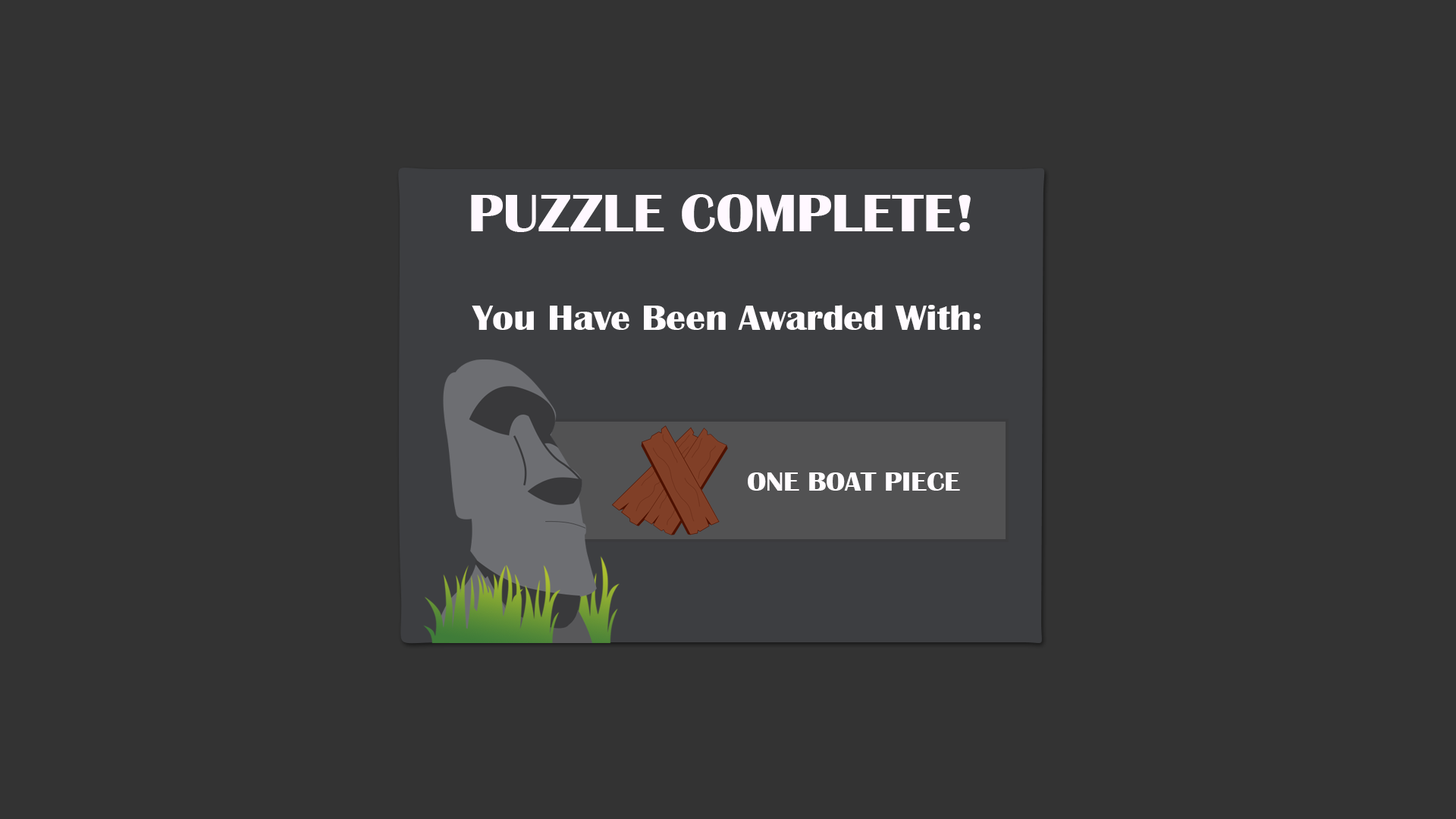
<style>
.page{position:relative;width:1456px;height:819px;background:#333333}
.page>*{position:absolute;margin:0}
.t1{font:54.6px "BritannicBold";letter-spacing:-0.005em;color:#fff8ff;scale:1.08 1}
.t2{font:36.4px "BritannicBold";letter-spacing:-0.005em;color:#fffcff;scale:1.08 1}
.t3{font:27.3px "BritannicBold";letter-spacing:-0.005em;color:#fffcff;scale:1.08 1}
</style>
<div class="page">
<p class="t1" style="left:471px;top:194px;width:500px;height:38px">PUZZLE COMPLETE!</p>
<p class="t2" style="left:472px;top:305px;width:509px;height:25px">You Have Been Awarded With:</p>
<p class="t3" style="left:748px;top:472px;width:212px;height:19px">ONE BOAT PIECE</p>
</div>
